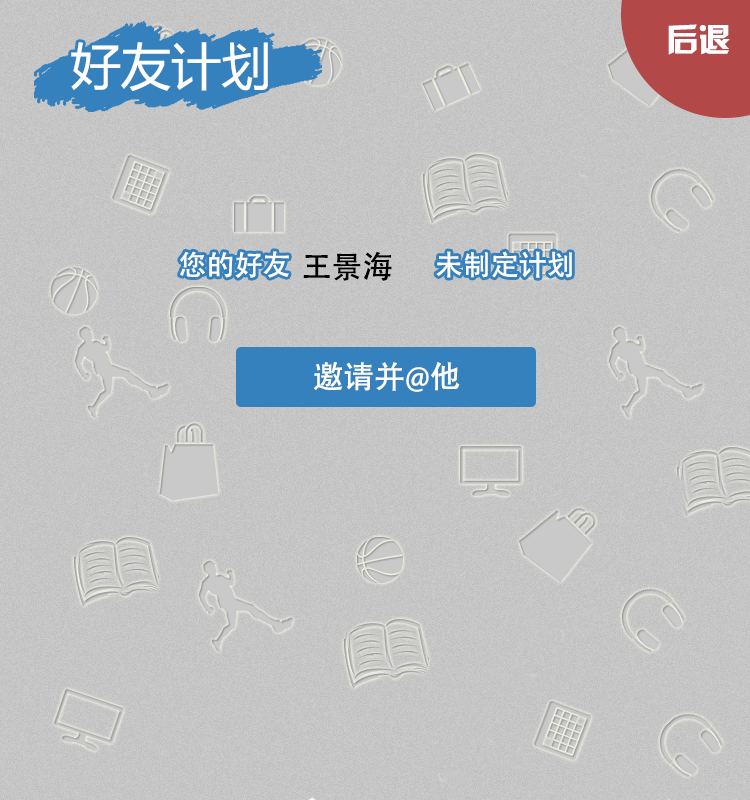
<style>
.page{position:relative;width:750px;height:800px}
.page>*{position:absolute;margin:0}
.t1{font:50.2px "MicrosoftYaHei";color:#ffffff}
.t2{font:28px "AdobeHeitiStd-Regular";color:#ffffff}
.t3{font:30.7px "AdobeHeitiStd-Regular";color:#000000}
.t4{font:30.7px "AdobeHeitiStd-Regular";color:#ffffff}
</style>
<div class="page">
<p class="t1" style="left:71px;top:42px;width:197px;height:49px">好友计划</p>
<p class="t2" style="left:180px;top:251px;width:392px;height:27px">您的好友                       未制定计划</p>
<p class="t3" style="left:303px;top:251px;width:89px;height:30px">王景海</p>
<p class="t4" style="left:314px;top:362px;width:146px;height:30px">邀请并@他</p>
</div>
